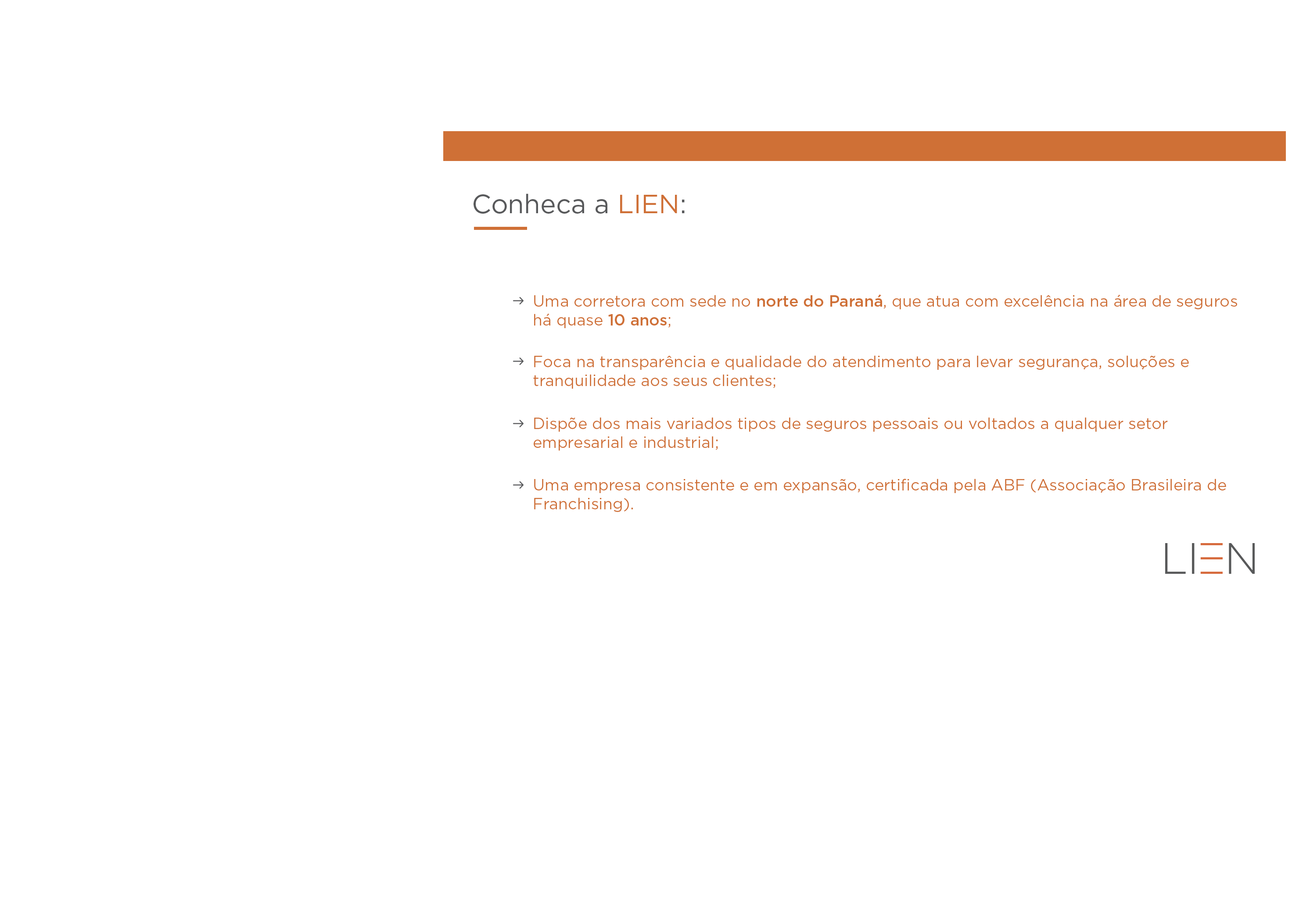
<style>
.page{position:relative;width:1292px;height:923px;background:#ffffff}
.page>*{position:absolute;margin:0}
.t1{font:26.3px "Gotham-Book";color:#58595b}
.t2{font:26.3px "Gotham-Book";color:#cf7036}
.t3{font:15.8px "Gotham-Book";color:#cf7036}
.t4{font:15.8px "Gotham-Medium";color:#cf7036}
</style>
<div class="page">
<p class="t1" style="left:473px;top:193px;width:211px;height:21px">Conheca a <span class="t2">LIEN</span>:</p>
<p class="t3" style="left:534px;top:294px;width:703px;height:34px">Uma corretora com sede no <span class="t4">norte do Paraná</span>, que atua com excelência na área de seguros há quase <span class="t4">10 anos</span>;</p>
<p class="t3" style="left:533px;top:355px;width:656px;height:34px">Foca na transparência e qualidade do atendimento para levar segurança, soluções e tranquilidade aos seus clientes;</p>
<p class="t3" style="left:534px;top:417px;width:634px;height:34px">Dispõe dos mais variados tipos de seguros pessoais ou voltados a qualquer setor empresarial e industrial;</p>
<p class="t3" style="left:534px;top:479px;width:692px;height:33px">Uma empresa consistente e em expansão, certificada pela ABF (Associação Brasileira de Franchising).</p>
</div>
